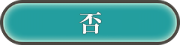
<style>
.page{position:relative;width:180px;height:45px;background:#239e9f}
.page>*{position:absolute;margin:0}
.t1{font:24px "RyuminPro-ExBold";color:#fdfbf9}
</style>
<div class="page">
<p class="t1" style="left:79px;top:12px;width:22px;height:22px">否</p>
</div>
